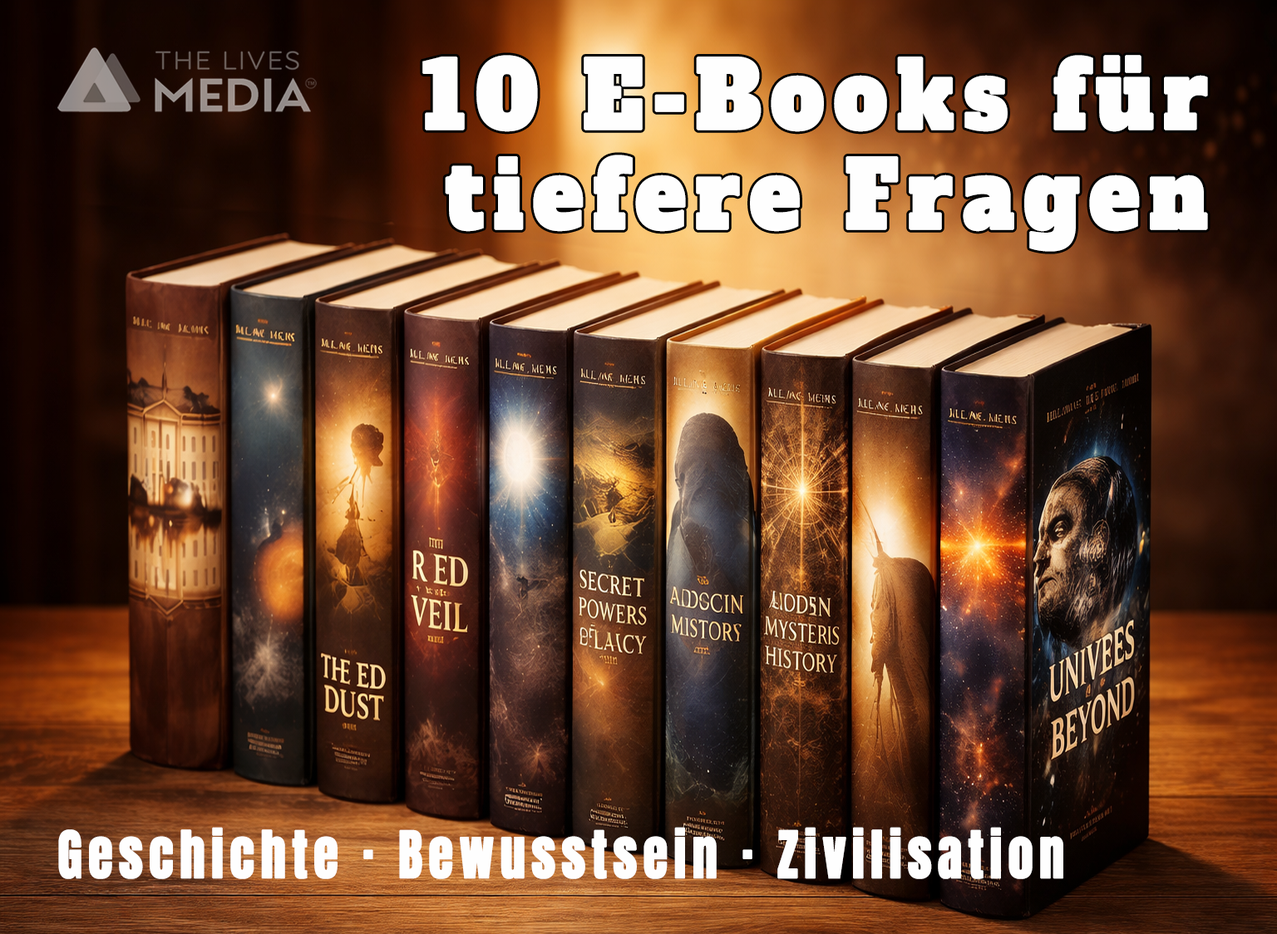
<style>
.page{position:relative;width:1277px;height:934px}
.page>*{position:absolute;margin:0}
.t1{font:91.4px "AlfaSlabOne-Regular";letter-spacing:0.1em;color:#fefefe;font-weight:bold;scale:0.91 1}
.t2{font:54.9px "Anton-Regular";letter-spacing:0.1em;color:#fefefe;font-weight:bold;scale:0.91 1}
</style>
<div class="page">
<p class="t1" style="left:422px;top:55px;width:786px;height:197px;text-align:right">10 E-Books für tiefere Fragen</p>
<p class="t2" style="left:58px;top:827px;width:1005px;height:52px">Geschichte · Bewusstsein · Zivilisation</p>
</div>
